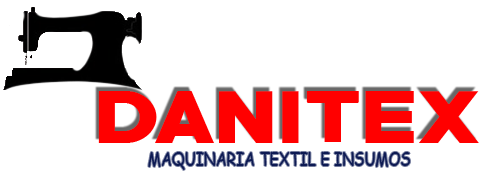
<style>
.page{position:relative;width:492px;height:184px;background:#ffffff}
.page>*{position:absolute;margin:0}
.t1{font:66.9px "PRIMETIME-Regular";color:#ff0000;text-transform:uppercase;scale:1.17 1}
.t2{font:18.8px "ComicSansMS";color:#0d1a53;text-transform:uppercase;scale:0.79 1}
</style>
<div class="page">
<p class="t1" style="left:98px;top:91px;width:381px;height:52px">DANITEX</p>
<p class="t2" style="left:148px;top:152px;width:262px;height:18px">MAQUINARIA TEXTIL E INSUMOS</p>
</div>
